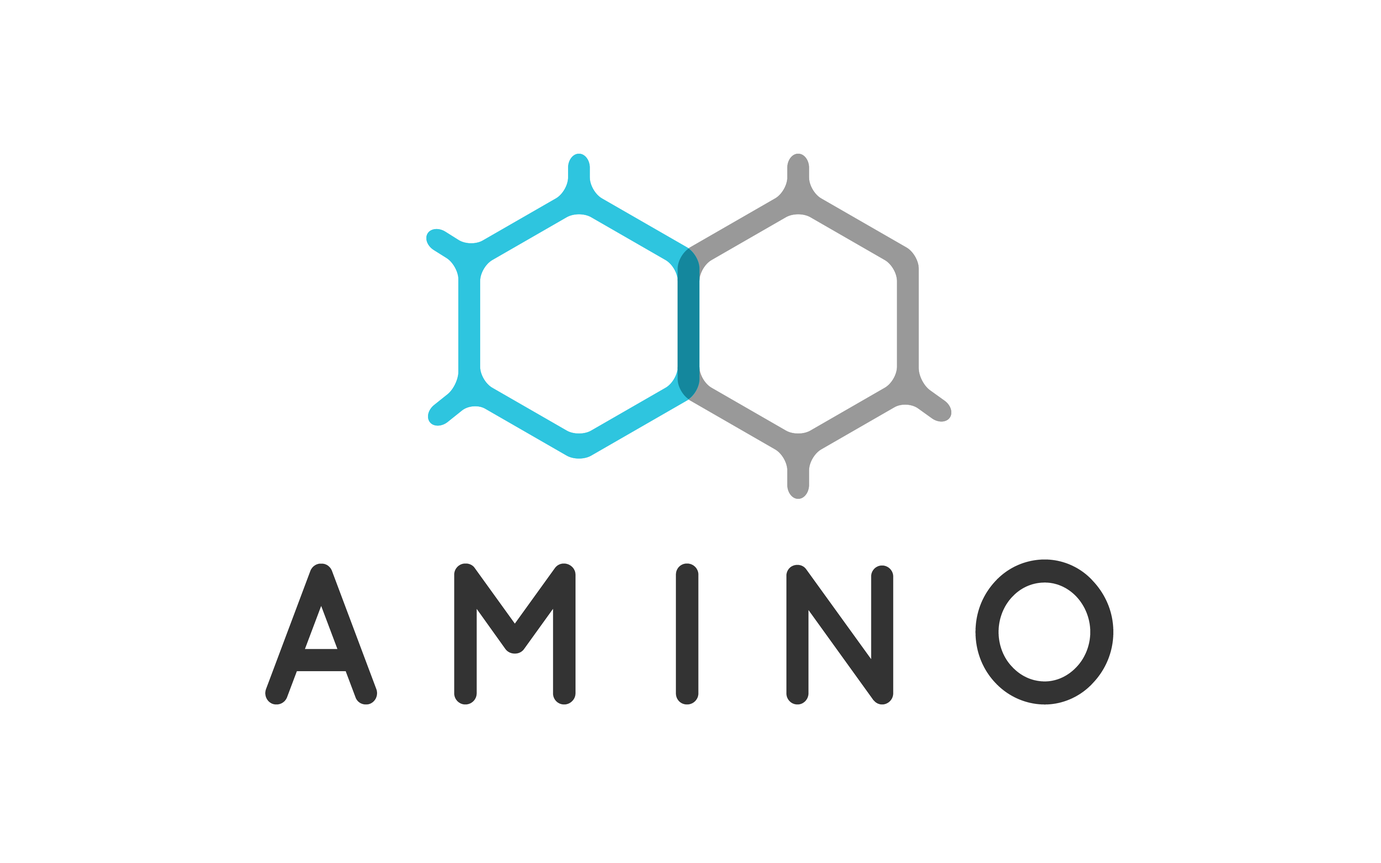
<style>
.page{position:relative;width:1381px;height:863px;background:#ffffff}
.page>*{position:absolute;margin:0}
.t1{font:201.3px "QuicksandBold-Regular";letter-spacing:0.25em;color:#333333}
.t2{font:201.3px "QuicksandBold-Regular";color:#333333}
</style>
<div class="page">
<p class="t1" style="left:265px;top:559px;width:849px;height:146px">AMIN<span class="t2">O</span></p>
</div>
